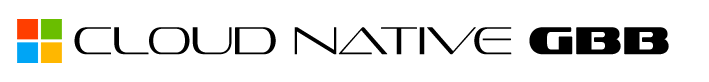
<style>
.page{position:relative;width:709px;height:82px;background:#ffffff}
.page>*{position:absolute;margin:0}
.t1{font:39.7px "SofachromeEl-Regular";letter-spacing:0.01em;color:#000000}
.t2{font:39.7px "SofachromeRg-Regular";letter-spacing:0.01em;color:#000000}
</style>
<div class="page">
<p class="t1" style="left:74px;top:27px;width:595px;height:28px">Cloud Native<span class="t2"> GBB</span></p>
</div>
